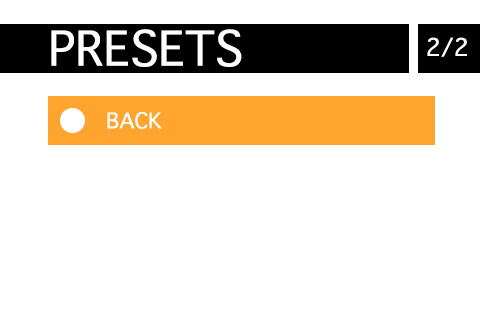
<style>
.page{position:relative;width:480px;height:320px;background:#ffffff}
.page>*{position:absolute;margin:0}
.t1{font:46.4px "Thonburi";color:#ffffff}
.t2{font:23.3px "Thonburi";color:#fefefe}
.t3{font:20.8px "Thonburi";color:#ffffff}
</style>
<div class="page">
<p class="t1" style="left:51px;top:29px;width:191px;height:38px">PRESETS</p>
<p class="t2" style="left:427px;top:37px;width:40px;height:20px">2/2</p>
<p class="t3" style="left:107px;top:112px;width:55px;height:17px">BACK</p>
</div>
